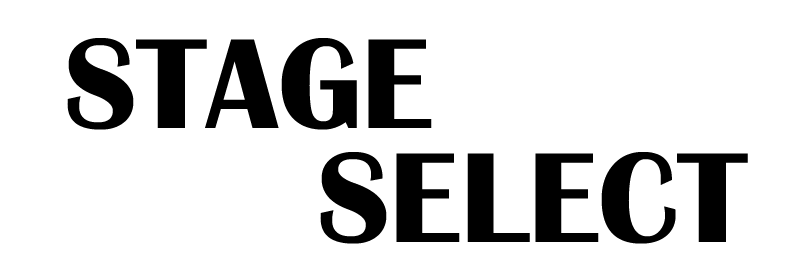
<style>
.page{position:relative;width:800px;height:256px;background:#ffffff}
.page>*{position:absolute;margin:0}
.t1{font:132.9px "BritannicBold";color:#000000}
</style>
<div class="page">
<p class="t1" style="left:67px;top:38px;width:365px;height:92px">STAGE</p>
<p class="t1" style="left:320px;top:152px;width:428px;height:92px">SELECT</p>
</div>
